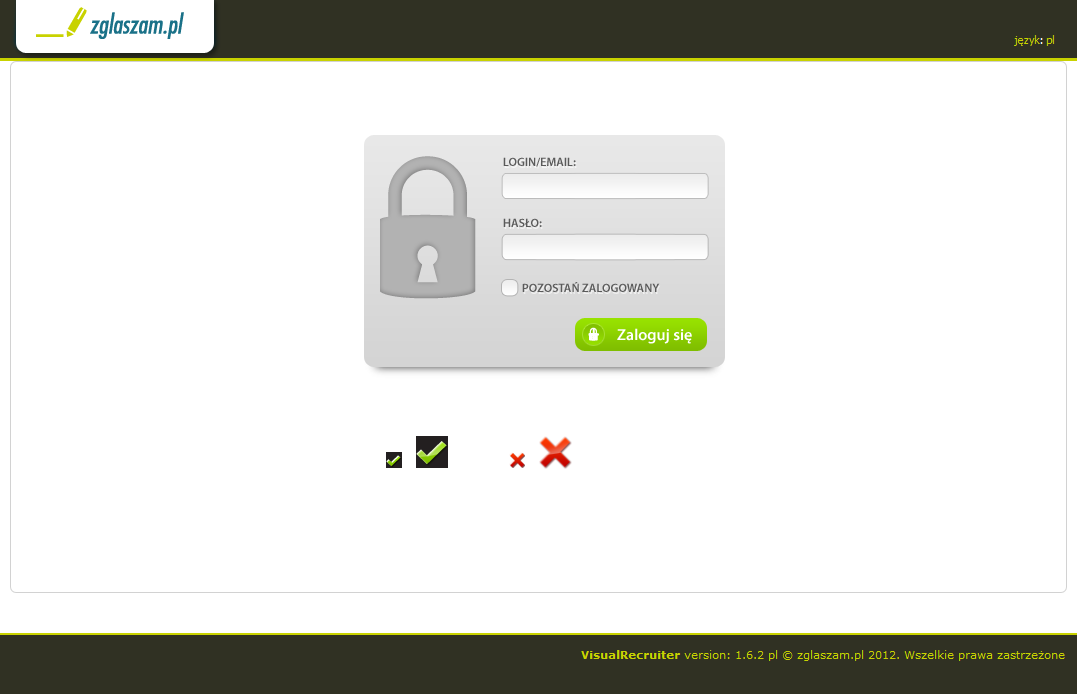
<style>
.page{position:relative;width:1077px;height:694px;background:#ffffff}
.page>*{position:absolute;margin:0}
.t1{font:12px "MyriadPro-Semibold";color:#5a5a5a}
.t2{font:20.6px "MyriadPro-Bold";color:#ffffff}
.t3{font:16px "MyriadPro-Semibold";color:#ffffff}
</style>
<div class="page">
<p class="t1" style="left:503px;top:157px;width:73px;height:10px">LOGIN/EMAIL:</p>
<p class="t1" style="left:503px;top:218px;width:39px;height:9px">HASŁO:</p>
<p class="t1" style="left:522px;top:282px;width:138px;height:10px">POZOSTAŃ ZALOGOWANY</p>
<p class="t2" style="left:588px;top:329px;width:11px;height:11px">+</p>
<p class="t3" style="left:617px;top:328px;width:75px;height:16px">Zaloguj się</p>
</div>
